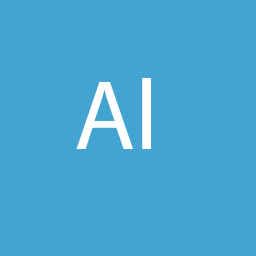
<style>
.page{position:relative;width:256px;height:256px;background:#44a4d1}
.page>*{position:absolute;margin:0}
.t1{font:100px "MyriadPro-Regular";color:#ffffff}
</style>
<div class="page">
<p class="t1" style="left:76px;top:78px;width:75px;height:71px">Al</p>
</div>
